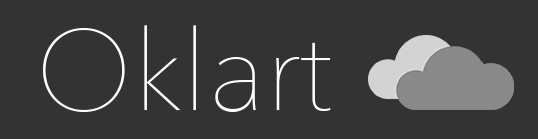
<style>
.page{position:relative;width:538px;height:139px;background:#333333}
.page>*{position:absolute;margin:0}
.t1{font:112px "AvenirNext-UltraLight";color:#ffffff}
</style>
<div class="page">
<p class="t1" style="left:43px;top:25px;width:288px;height:87px">Oklart</p>
</div>
